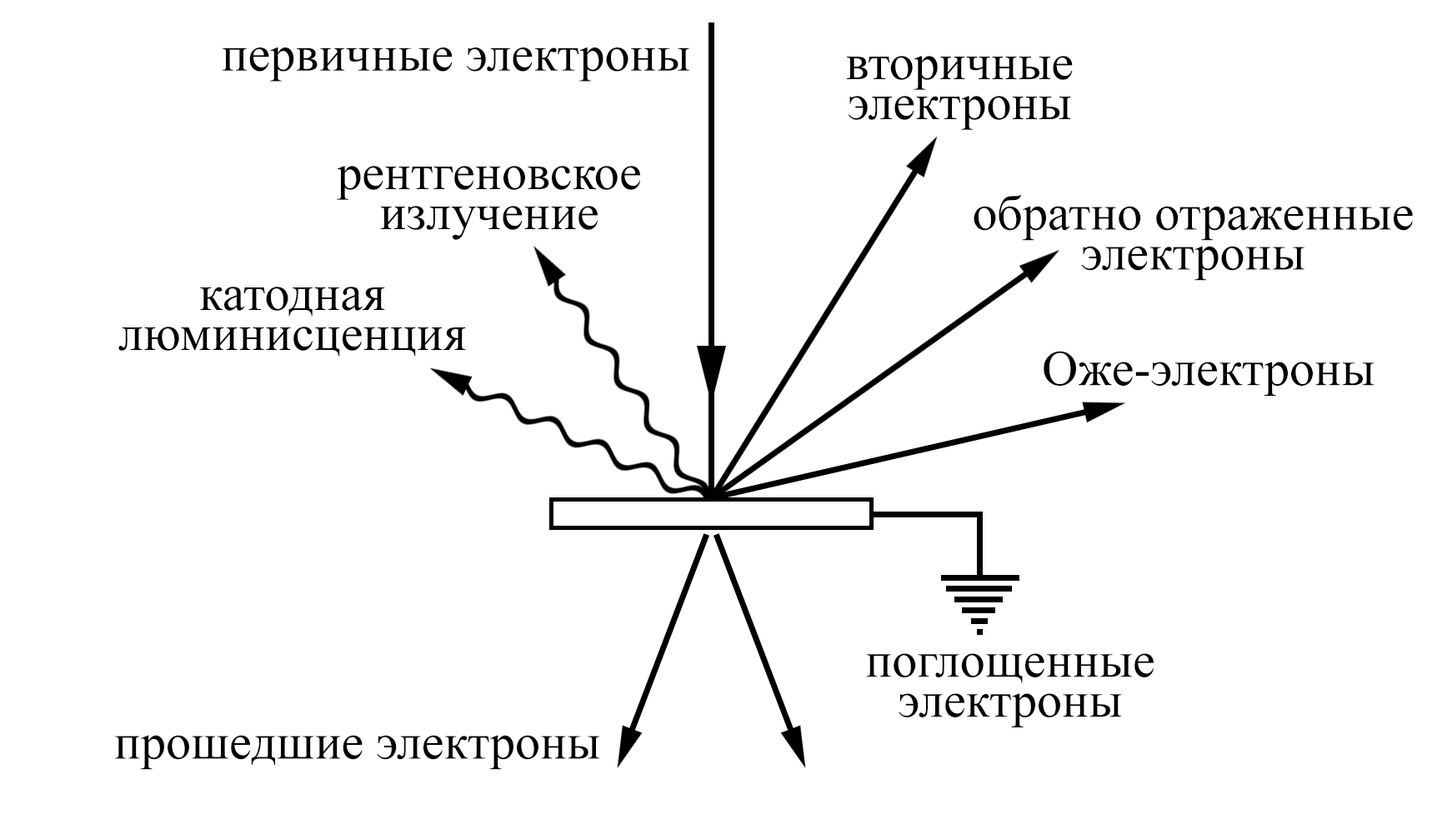
<style>
.page{position:relative;width:1447px;height:824px;background:#ffffff}
.page>*{position:absolute;margin:0}
.t1{font:50px "TimesNewRomanPSMT";color:#000000}
.t2{font:50px/40px "TimesNewRomanPSMT";color:#000000}
</style>
<div class="page">
<p class="t1" style="left:223px;top:48px;width:466px;height:34px">первичные электроны</p>
<p class="t2" style="left:847px;top:56px;width:226px;height:74px;text-align:center">вторичные<br>электроны</p>
<p class="t2" style="left:337px;top:166px;width:303px;height:74px;text-align:center">рентгеновское<br>излучение</p>
<p class="t2" style="left:973px;top:194px;width:440px;height:87px;text-align:center">обратно отраженные<br>электроны</p>
<p class="t2" style="left:118px;top:287px;width:348px;height:70px;text-align:center">катодная<br>люминисценция</p>
<p class="t1" style="left:1043px;top:351px;width:331px;height:45px">Оже-электроны</p>
<p class="t2" style="left:866px;top:653px;width:287px;height:75px;text-align:center">поглощенные<br>электроны</p>
<p class="t1" style="left:115px;top:735px;width:484px;height:35px">прошедшие электроны</p>
</div>
